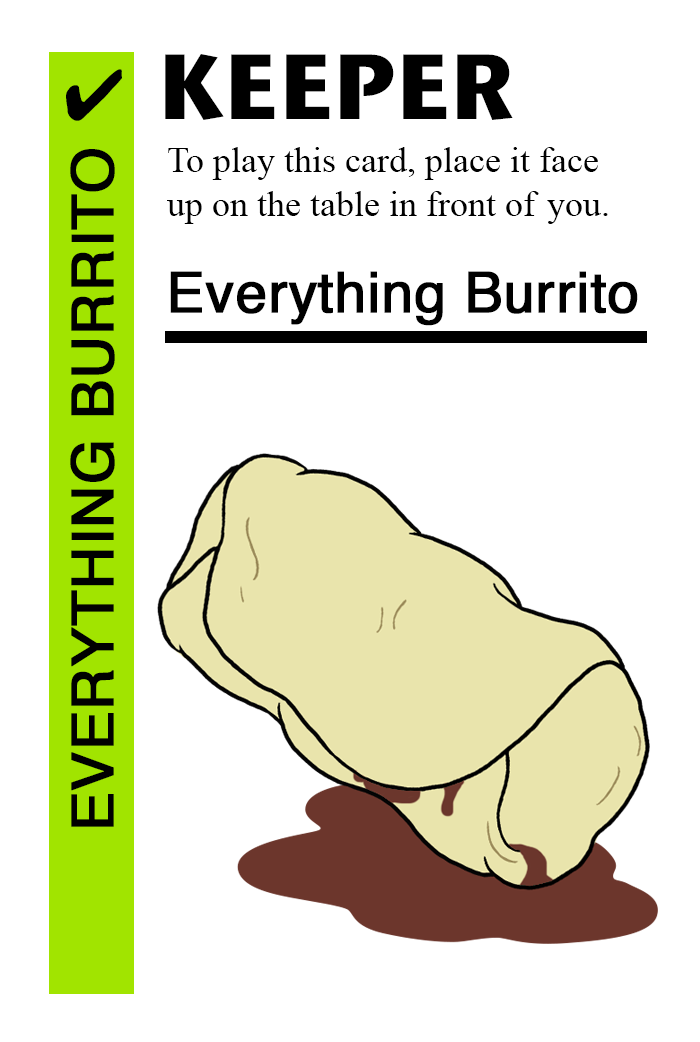
<style>
.page{position:relative;width:700px;height:1042px;background:#ffffff}
.page>*{position:absolute;margin:0}
.t1{font:92px "StoneSansITC-Bold";color:#000000}
.t2{font:72px "MS-Gothic";color:#000000}
.t3{font:58px "Helvetica";color:#000000;font-weight:bold}
.t4{font:36px "TimesNewRomanPSMT";color:#000000}
.t5{font:56px "Helvetica";color:#000000;font-weight:bold}
</style>
<div class="page">
<p class="t1" style="left:165px;top:54px;width:348px;height:66px">KEEPER</p>
<p class="t2" style="left:66px;top:69px;width:56px;height:52px">✔</p>
<p class="t3" style="left:70px;top:149px;width:45px;height:678px;rotate:-90deg">EVERYTHING BURRITO</p>
<p class="t4" style="left:167px;top:147px;width:441px;height:77px">To play this card, place it face<br>up on the table in front of you.</p>
<p class="t5" style="left:170px;top:271px;width:468px;height:55px">Everything Burrito</p>
</div>
